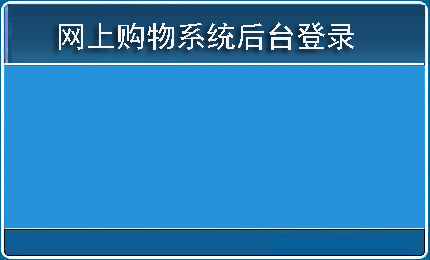
<style>
.page{position:relative;width:430px;height:260px;background:#2692da}
.page>*{position:absolute;margin:0}
.t1{font:30px "SimHei";color:#f5f5f5}
</style>
<div class="page">
<p class="t1" style="left:59px;top:22px;width:295px;height:28px">网上购物系统后台登录</p>
</div>
